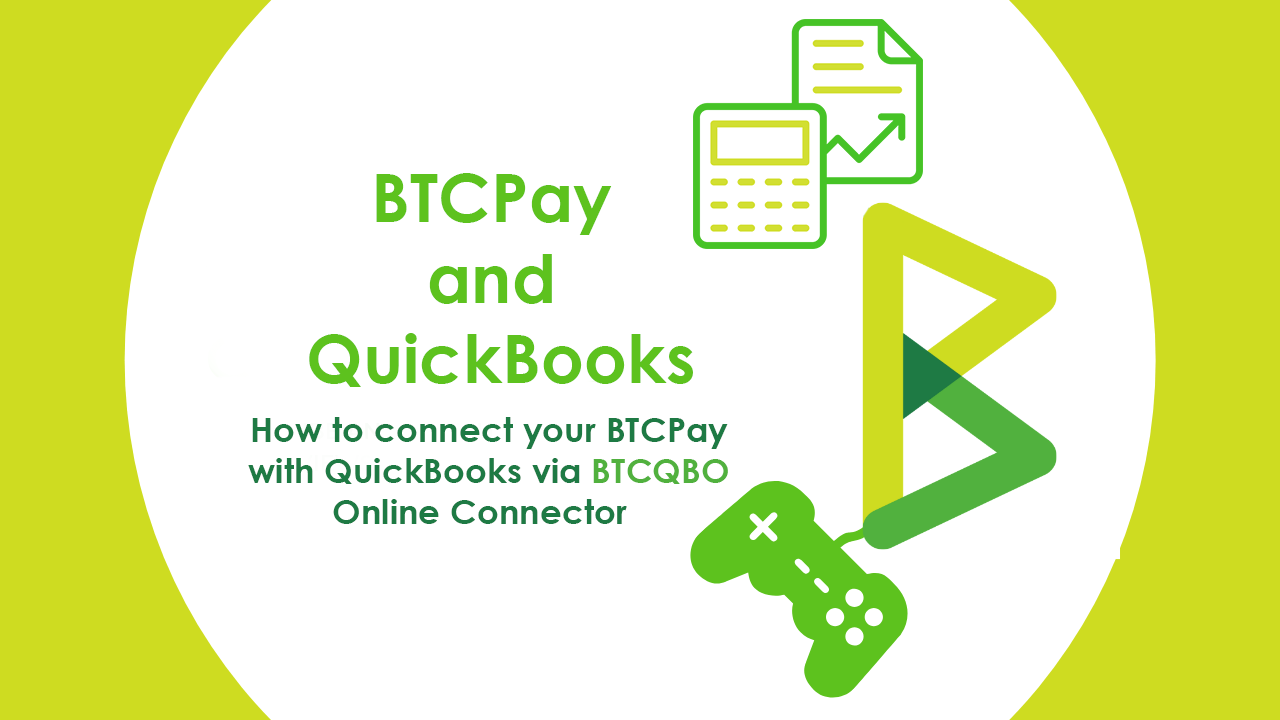
<style>
.page{position:relative;width:1280px;height:720px;background:#ffffff}
.page>*{position:absolute;margin:0}
.t1{font:67.4px "CenturyGothic-Bold";color:#5dc21e}
.t2{font:34.3px "CenturyGothic-Bold";color:#1e7a44}
.t3{font:34.3px "CenturyGothic-Bold";color:#51b13e}
</style>
<div class="page">
<p class="t1" style="left:309px;top:173px;width:384px;height:214px;text-align:center">BTCPay <br>and <br>QuickBooks</p>
<p class="t2" style="left:248px;top:417px;width:480px;height:107px;text-align:center">How to connect your BTCPay<br>with QuickBooks via <span class="t3">BTCQBO<br></span>Online Connector</p>
</div>
